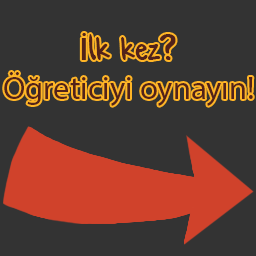
<style>
.page{position:relative;width:256px;height:256px;background:#333333}
.page>*{position:absolute;margin:0}
.t1{font:32.4px "MyriadPro-Regular";color:#52221a}
.t2{font:32.4px "FranklinGothic-Medium";color:#52221a}
.t3{font:32.4px "ConformityNormal";color:#52221a}
</style>
<div class="page">
<p class="t1" style="left:4px;top:33px;width:249px;height:73px;text-align:center"><span class="t2">İ</span><span class="t3">lk kez?<br></span>Öğreticiyi oynayın!</p>
</div>
